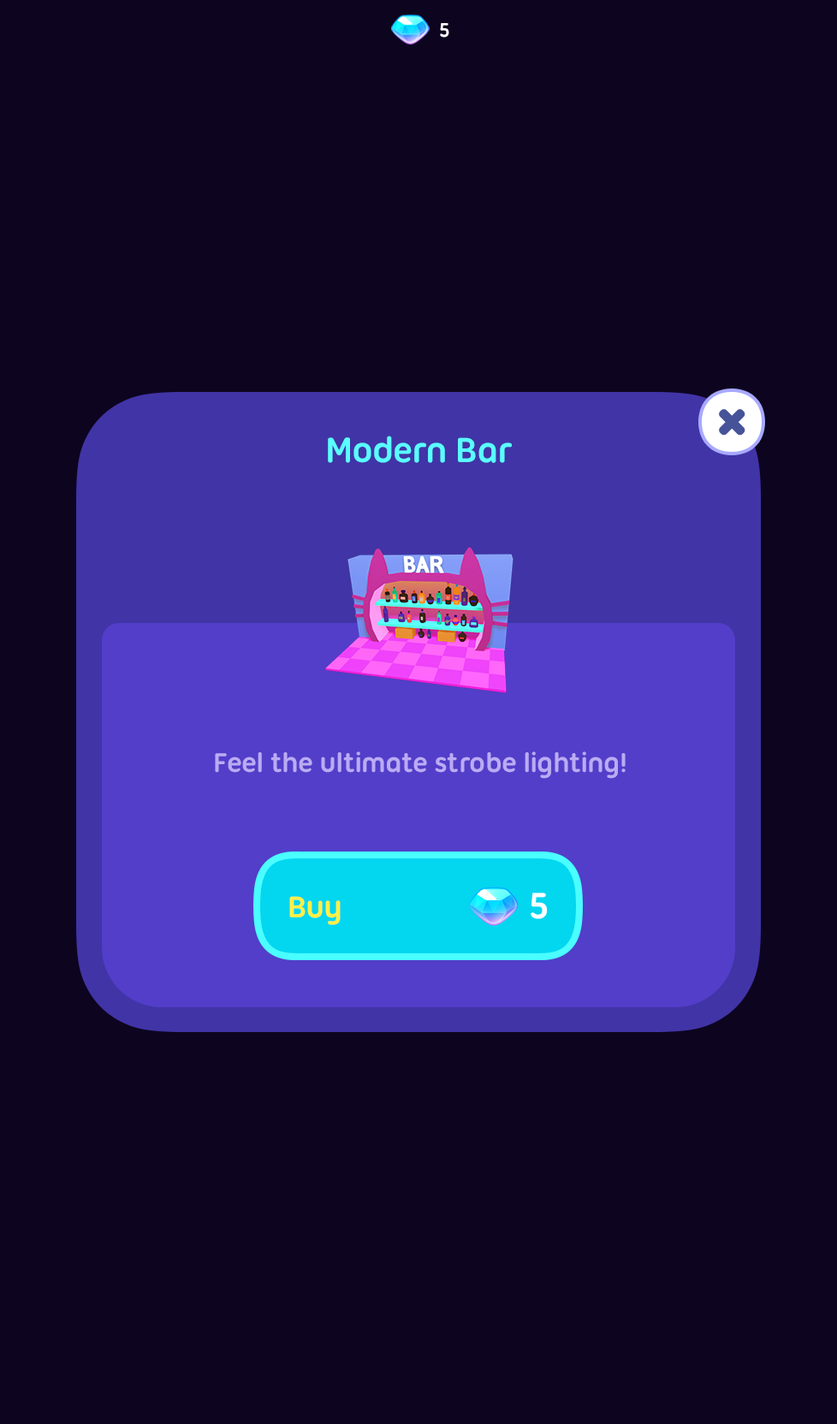
<style>
.page{position:relative;width:837px;height:1424px;background:#0d0420}
.page>*{position:absolute;margin:0}
.t1{font:21.4px "UbuntuTitling-Bold";letter-spacing:-0.025em;color:#ffffff}
.t2{font:37.7px "UbuntuTitling-Bold";letter-spacing:-0.025em;color:#5afdff}
.t3{font:29.1px "UbuntuTitling-Bold";letter-spacing:-0.025em;color:#bbabf4}
.t4{font:39.4px "UbuntuTitling-Bold";letter-spacing:-0.025em;color:#ffffff}
.t5{font:32.5px "UbuntuTitling-Bold";letter-spacing:-0.025em;color:#fff045}
</style>
<div class="page">
<p class="t1" style="left:440px;top:23px;width:9px;height:15px">5</p>
<p class="t2" style="left:328px;top:436px;width:184px;height:27px">Modern Bar</p>
<p class="t3" style="left:215px;top:752px;width:411px;height:27px">Feel the ultimate strobe lighting!</p>
<p class="t4" style="left:531px;top:893px;width:16px;height:26px">5</p>
<p class="t5" style="left:289px;top:896px;width:52px;height:29px">Buy</p>
</div>
